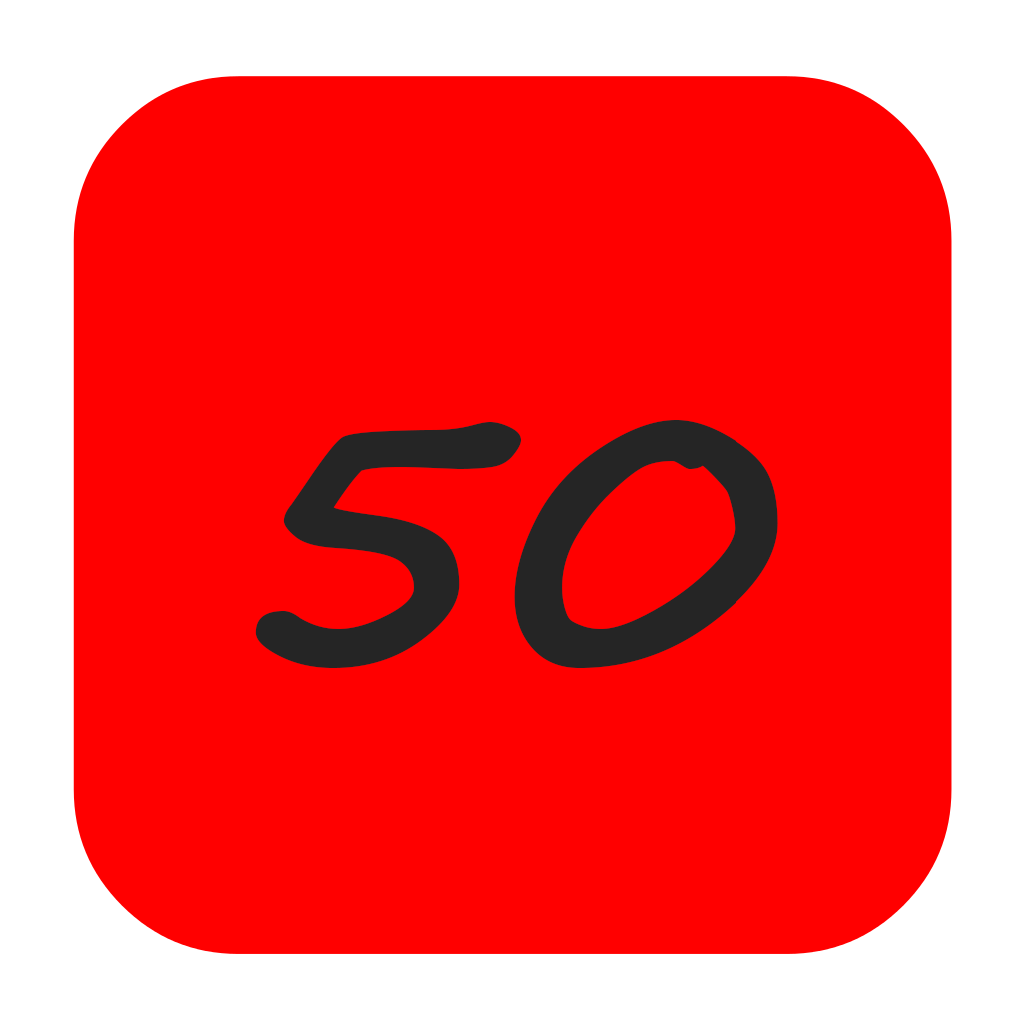
<style>
.page{position:relative;width:1024px;height:1024px;background:#ff0000}
.page>*{position:absolute;margin:0}
.t1{font:369.2px "SegoePrint-Bold";letter-spacing:0.025em;color:#252525}
</style>
<div class="page">
<p class="t1" style="left:255px;top:420px;width:523px;height:248px">50</p>
</div>
